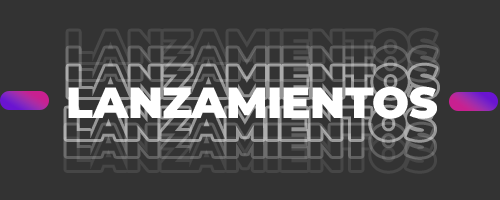
<style>
.page{position:relative;width:500px;height:200px;background:#333333}
.page>*{position:absolute;margin:0}
.t1{font:43.7px "Montserrat-Black";letter-spacing:-0.016em;color:#333333}
.t2{font:43.7px "Montserrat-Black";letter-spacing:-0.016em;color:#ffffff}
.t3{font:43.7px "Montserrat-Black";letter-spacing:-0.016em}
</style>
<div class="page">
<p class="t1" style="left:68px;top:30px;width:369px;height:33px">LANZAMIENTOS</p>
<p class="t1" style="left:68px;top:47px;width:369px;height:33px">LANZAMIENTOS</p>
<p class="t2" style="left:68px;top:86px;width:369px;height:33px">LANZAMIENTOS</p>
<p class="t3" style="left:66px;top:107px;width:368px;height:33px">LANZAMIENTOS</p>
<p class="t1" style="left:66px;top:124px;width:368px;height:33px">LANZAMIENTOS</p>
</div>
